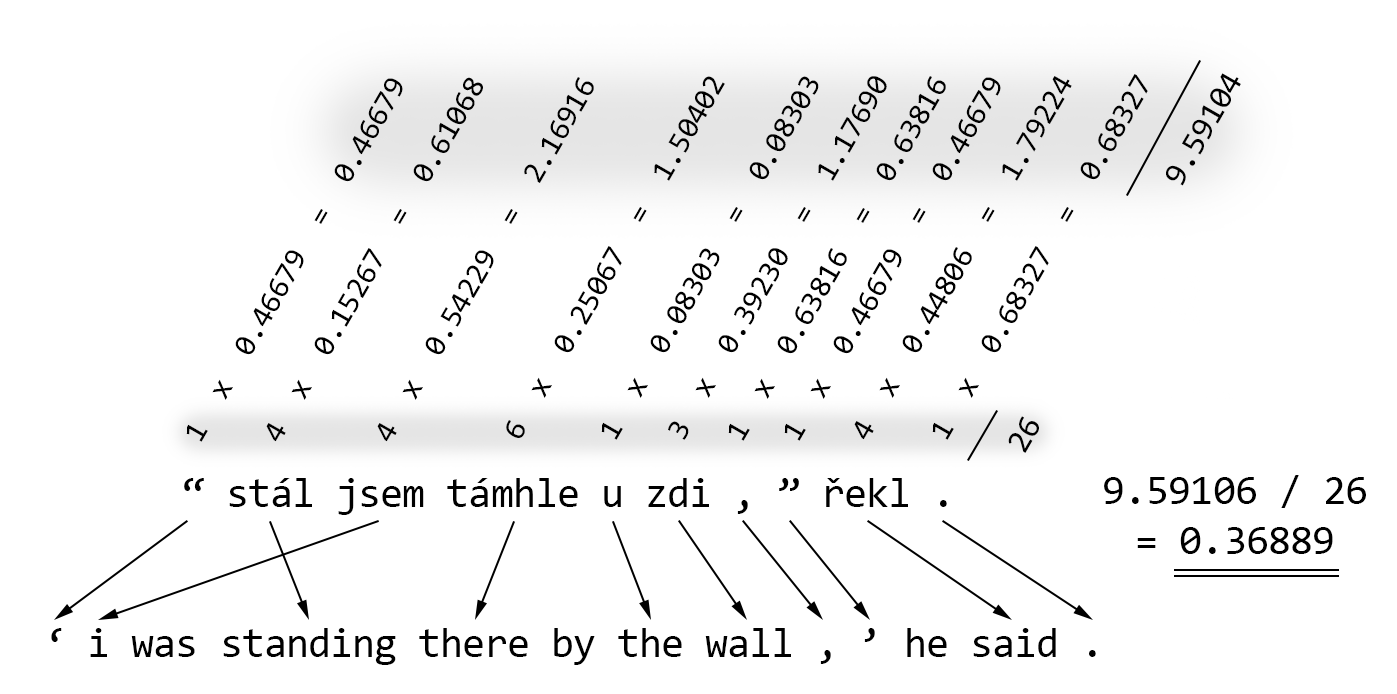
<style>
.page{position:relative;width:1397px;height:694px;background:#ffffff}
.page>*{position:absolute;margin:0}
.t1{font:31.3px "Consolas";letter-spacing:-0.02em;color:#000000}
.t2{font:33.3px "Consolas";letter-spacing:-0.02em;color:#000000}
.t3{font:41.7px "Consolas";letter-spacing:-0.02em;color:#000000}
</style>
<div class="page">
<p class="t1" style="left:186px;top:78px;width:217px;height:364px;rotate:-60deg">1  x  0.46679  =  0.46679</p>
<p class="t1" style="left:266px;top:77px;width:217px;height:365px;rotate:-60deg">4  x  0.15267  =  0.61068</p>
<p class="t1" style="left:377px;top:77px;width:217px;height:365px;rotate:-60deg">4  x  0.54229  =  2.16916</p>
<p class="t1" style="left:506px;top:76px;width:219px;height:362px;rotate:-60deg">6  x  0.25067  =  1.50402</p>
<p class="t1" style="left:601px;top:76px;width:218px;height:364px;rotate:-60deg">1  x  0.08303  =  0.08303</p>
<p class="t1" style="left:668px;top:76px;width:219px;height:364px;rotate:-60deg">3  x  0.39230  =  1.17690</p>
<p class="t1" style="left:728px;top:76px;width:218px;height:365px;rotate:-60deg">1  x  0.63816  =  0.63816</p>
<p class="t1" style="left:784px;top:77px;width:217px;height:364px;rotate:-60deg">1  x  0.46679  =  0.46679</p>
<p class="t1" style="left:854px;top:76px;width:218px;height:364px;rotate:-60deg">4  x  0.44806  =  1.79224</p>
<p class="t1" style="left:932px;top:74px;width:216px;height:366px;rotate:-60deg">1  x  0.68327  =  0.68327</p>
<p class="t2" style="left:1166px;top:73px;width:75px;height:113px;rotate:-60deg">9.59104</p>
<p class="t2" style="left:1008px;top:416px;width:31px;height:37px;rotate:-60deg">26</p>
<p class="t3" style="left:184px;top:478px;width:763px;height:37px">“ stál jsem támhle u zdi , ” řekl .</p>
<p class="t3" style="left:1104px;top:475px;width:262px;height:79px;text-align:center">9.59106 / 26<br>= 0.36889</p>
<p class="t3" style="left:51px;top:628px;width:1045px;height:37px">‘ i was standing there by the wall , ’ he said .</p>
</div>
